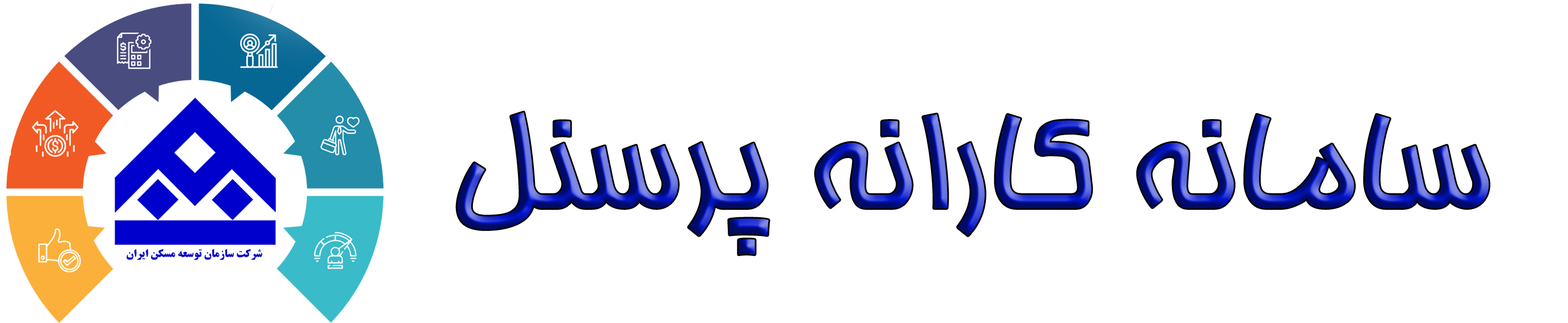
<style>
.page{position:relative;width:1568px;height:323px;background:#ffffff}
.page>*{position:absolute;margin:0}
.t1{font:147.7px "BHoma"}
</style>
<div class="page">
<p class="t1" style="left:457px;top:112px;width:1032px;height:143px">سامانه کارانه پرسنل</p>
</div>
